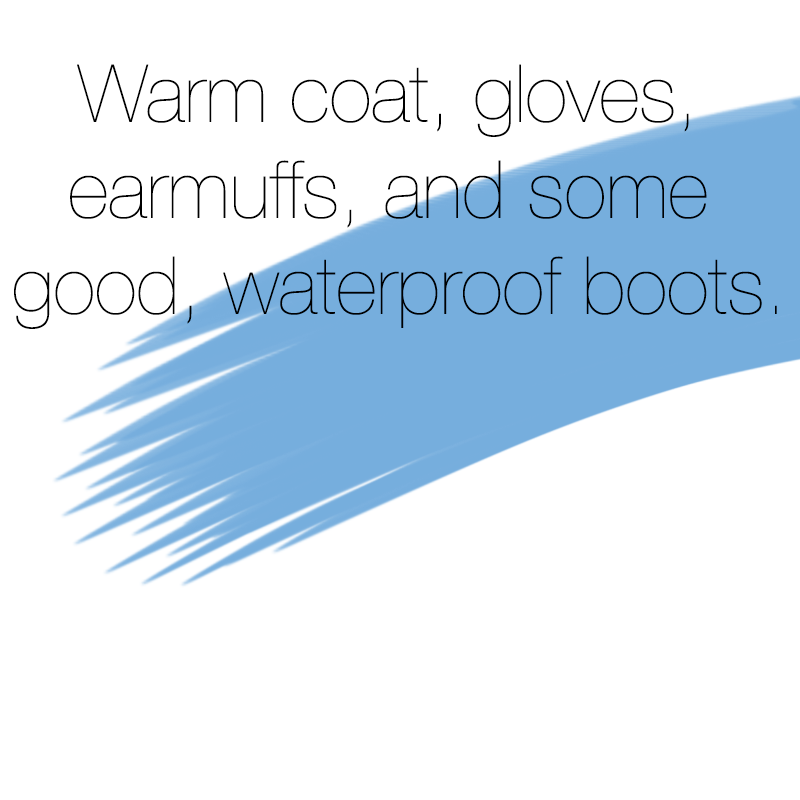
<style>
.page{position:relative;width:800px;height:800px;background:#ffffff}
.page>*{position:absolute;margin:0}
.t1{font:80px "HelveticaNeue-UltraLight";color:#000000}
</style>
<div class="page">
<p class="t1" style="left:14px;top:64px;width:763px;height:265px;text-align:center">Warm coat, gloves, <br>earmuffs, and some <br>good, waterproof boots.</p>
</div>
